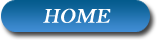
<style>
.page{position:relative;width:157px;height:40px}
.page>*{position:absolute;margin:0}
.t1{font:36px "BellMT";color:#ffffff;font-weight:bold;font-style:italic}
</style>
<div class="page">
<p class="t1" style="left:43px;top:8px;width:68px;height:15px">HOME</p>
</div>
